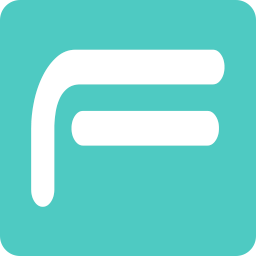
<style>
.page{position:relative;width:256px;height:256px;background:#4ecac2}
.page>*{position:absolute;margin:0}
.t1{font:360px "SpaceAge";color:#ffffff;scale:0.67 1}
</style>
<div class="page">
<p class="t1" style="left:31px;top:49px;width:194px;height:158px">F</p>
</div>
